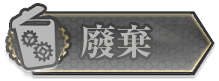
<style>
.page{position:relative;width:219px;height:81px;background:#ffffff}
.page>*{position:absolute;margin:0}
.t1{font:36px "RyuminPr6N-ExBold";color:#b8b8b7}
</style>
<div class="page">
<p class="t1" style="left:81px;top:24px;width:70px;height:34px">廢棄</p>
</div>
